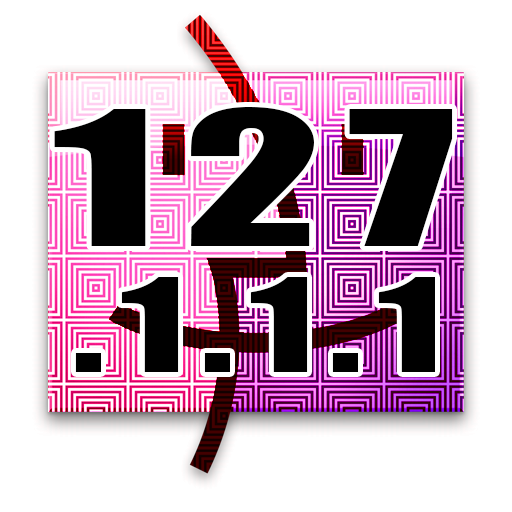
<style>
.page{position:relative;width:512px;height:512px;background:#ffffff}
.page>*{position:absolute;margin:0}
.t1{font:173.2px "Impact";letter-spacing:0.1em;color:#000000;scale:1.57 1}
.t2{font:119.5px "Impact";letter-spacing:0.1em;color:#000000;scale:1.4 1}
</style>
<div class="page">
<p class="t1" style="left:54px;top:107px;width:399px;height:139px">127</p>
<p class="t2" style="left:75px;top:277px;width:360px;height:95px">.1.1.1</p>
</div>
